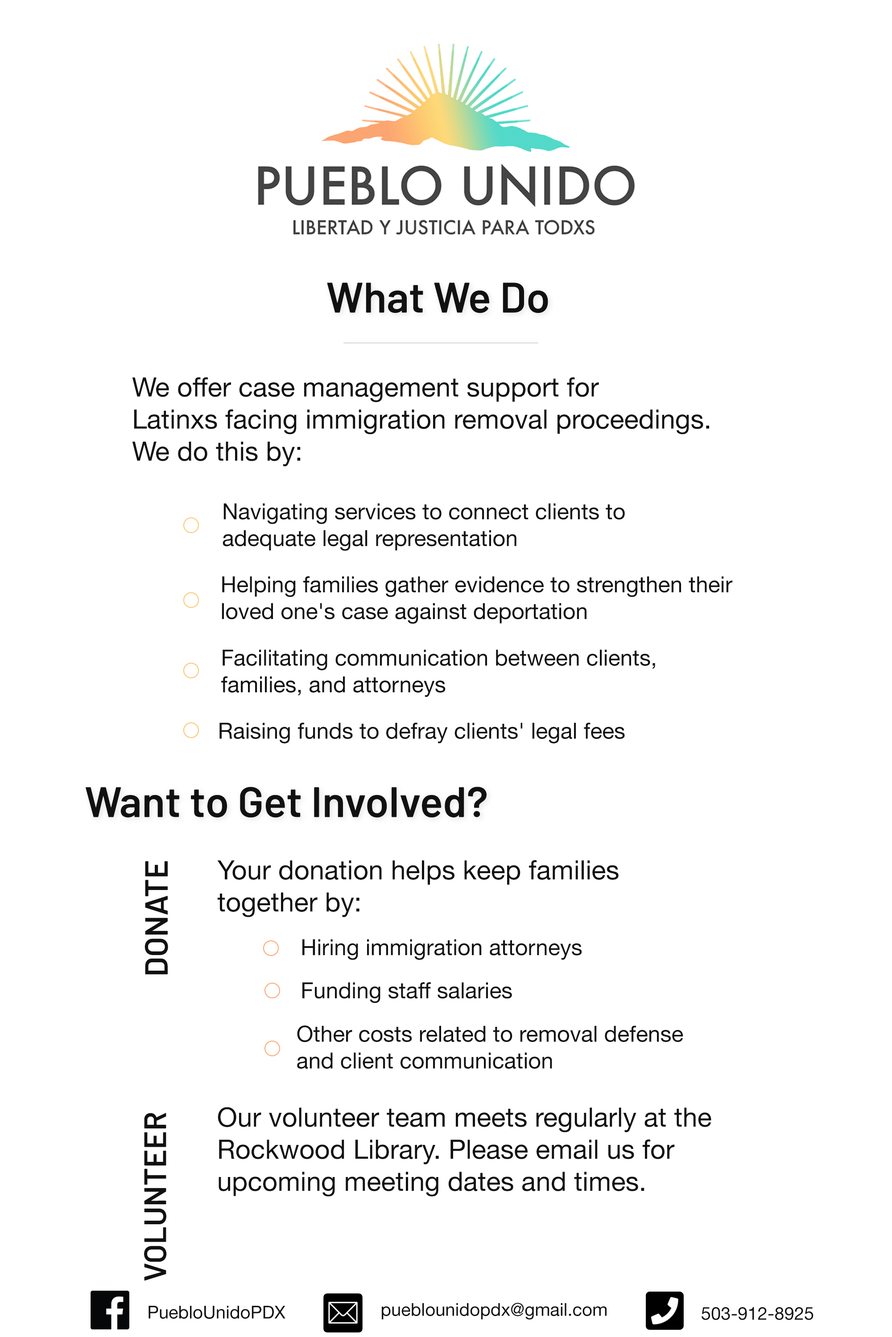
<style>
.page{position:relative;width:892px;height:1337px;background:#ffffff}
.page>*{position:absolute;margin:0}
.t1{font:42.8px "Barlow-SemiBold";color:#111111}
.t2{font:26.8px "HelveticaNeue";color:#111111}
.t3{font:22.3px "HelveticaNeue";color:#111111}
.t4{font:32.1px "Barlow-SemiBold";color:#111111}
.t5{font:31.2px "Barlow-SemiBold";color:#111111}
.t6{font:17.8px "HelveticaNeue";color:#111111}
</style>
<div class="page">
<p class="t1" style="left:327px;top:283px;width:221px;height:30px">What We Do</p>
<p class="t2" style="left:132px;top:377px;width:577px;height:90px">We offer case management support for <br>Latinxs facing immigration removal proceedings.<br>We do this by:</p>
<p class="t3" style="left:222px;top:503px;width:403px;height:48px">Navigating services to connect clients to <br>adequate legal representation</p>
<p class="t3" style="left:222px;top:576px;width:510px;height:48px">Helping families gather evidence to strengthen their <br>loved one's case against deportation</p>
<p class="t3" style="left:221px;top:650px;width:434px;height:47px">Facilitating communication between clients, <br>families, and attorneys</p>
<p class="t3" style="left:219px;top:723px;width:406px;height:21px">Raising funds to defray clients' legal fees</p>
<p class="t1" style="left:86px;top:787px;width:400px;height:31px">Want to Get Involved?</p>
<p class="t4" style="left:144px;top:861px;width:24px;height:114px;rotate:-90deg">DONATE</p>
<p class="t2" style="left:217px;top:860px;width:401px;height:57px">Your donation helps keep families <br>together by:</p>
<p class="t3" style="left:302px;top:939px;width:280px;height:21px">Hiring immigration attorneys</p>
<p class="t3" style="left:302px;top:983px;width:210px;height:20px">Funding staff salaries</p>
<p class="t3" style="left:297px;top:1026px;width:386px;height:43px">Other costs related to removal defense<br>and client communication</p>
<p class="t2" style="left:218px;top:1107px;width:493px;height:90px">Our volunteer team meets regularly at the <br>Rockwood Library. Please email us for <br>upcoming meeting dates and times.</p>
<p class="t5" style="left:144px;top:1113px;width:23px;height:168px;rotate:-90deg">VOLUNTEER</p>
<p class="t6" style="left:148px;top:1306px;width:137px;height:14px">PuebloUnidoPDX</p>
<p class="t6" style="left:382px;top:1303px;width:224px;height:17px">pueblounidopdx@gmail.com</p>
<p class="t6" style="left:701px;top:1308px;width:112px;height:12px">503-912-8925</p>
</div>
